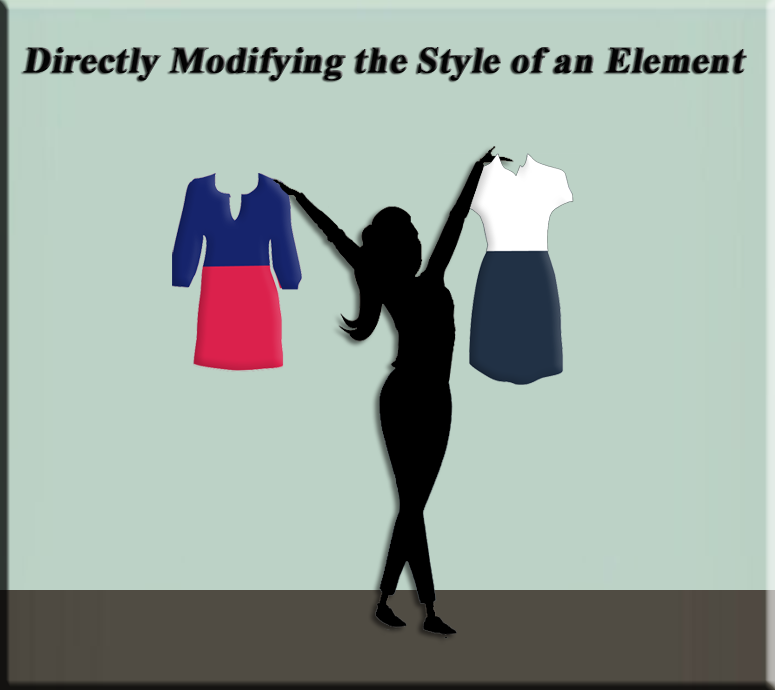
<style>
.page{position:relative;width:775px;height:690px;background:#bcd2c6}
.page>*{position:absolute;margin:0}
.t1{font:37px "TimesNewRomanPS-BoldMT";color:#040404;font-weight:bold;font-style:italic}
</style>
<div class="page">
<p class="t1" style="left:23px;top:47px;width:724px;height:34px">Directly Modifying the Style of an Element</p>
</div>
